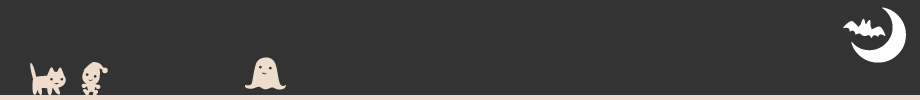
<style>
.page{position:relative;width:920px;height:100px;background:#333333}
.page>*{position:absolute;margin:0}
.t1{font:60px "Evilz";color:#ffffff;font-weight:bold}
.t2{font:36px "Evilz";color:#eeddcc;font-weight:bold}
</style>
<div class="page">
<p class="t1" style="left:843px;top:7px;width:63px;height:56px">v</p>
<p class="t2" style="left:30px;top:63px;width:36px;height:33px">+</p>
<p class="t2" style="left:81px;top:62px;width:27px;height:35px">t</p>
<p class="t2" style="left:245px;top:57px;width:41px;height:33px">q</p>
</div>
